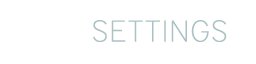
<style>
.page{position:relative;width:256px;height:64px;background:#ffffff}
.page>*{position:absolute;margin:0}
.t1{font:30px "DistrictPro-Thin";letter-spacing:0.05em;color:#aac2c3}
</style>
<div class="page">
<p class="t1" style="left:93px;top:20px;width:134px;height:22px">SETTINGS</p>
</div>
